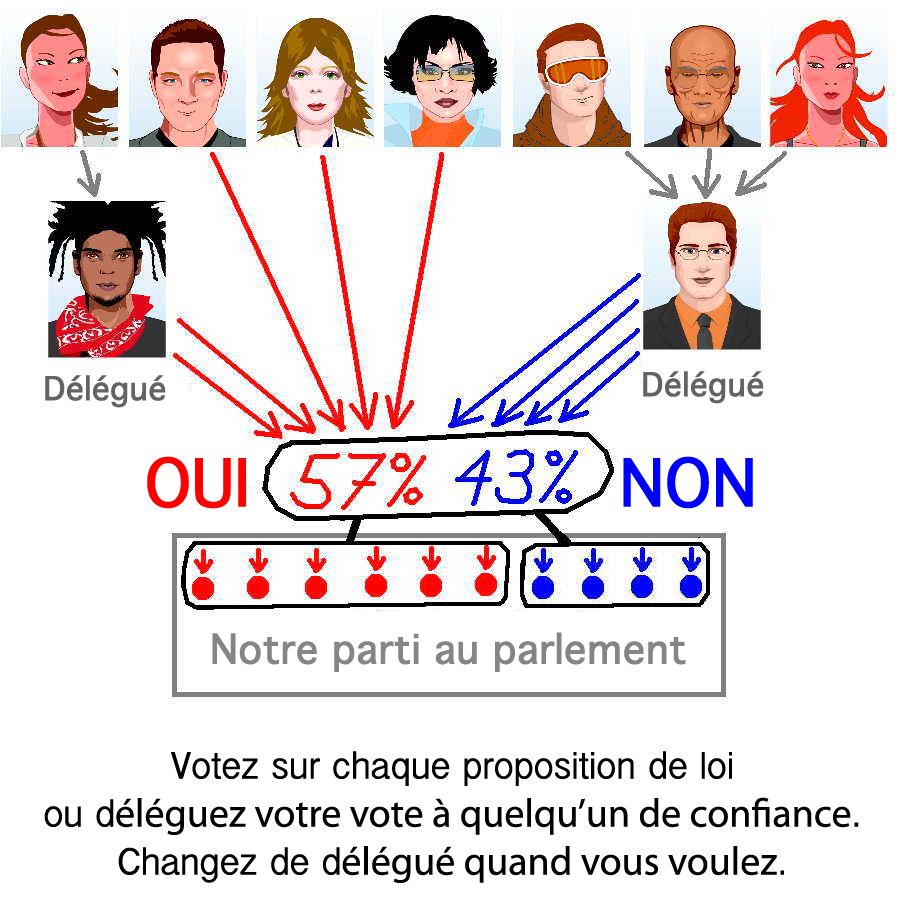
<style>
.page{position:relative;width:899px;height:910px;background:#ffffff}
.page>*{position:absolute;margin:0}
.t1{font:32px "Thonburi-Bold";color:#636363}
.t2{font:64px "Thonburi-Bold";color:#ff0000}
.t3{font:64px "Thonburi-Bold";color:#0000ff}
.t4{font:40px "Thonburi-Bold";color:#868585}
.t5{font:40px "MyriadPro-Regular";color:#000000}
.t6{font:40px "InaiMathi";color:#000000}
</style>
<div class="page">
<p class="t1" style="left:45px;top:375px;width:121px;height:33px">Délégué</p>
<p class="t1" style="left:643px;top:371px;width:121px;height:33px">Délégué</p>
<p class="t2" style="left:147px;top:456px;width:99px;height:53px">OUI</p>
<p class="t3" style="left:623px;top:456px;width:130px;height:53px">NON</p>
<p class="t4" style="left:212px;top:632px;width:474px;height:40px">Notre parti au parlement</p>
<p class="t5" style="left:44px;top:751px;width:815px;height:132px;text-align:center"><span class="t6">Votez sur chaque proposition de loi<br>ou d</span>éléguez votre vote à quelqu’un de confiance<span class="t6">.<br>Changez de d</span>élégué quand vous voulez<span class="t6">.</span></p>
</div>
